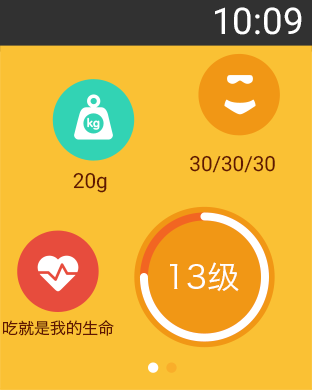
<style>
.page{position:relative;width:312px;height:390px;background:#fac134}
.page>*{position:absolute;margin:0}
.t1{font:36.7px "Roboto-Regular";color:#ffffff}
.t2{font:20.6px "Roboto-Regular";color:#601702}
.t3{font:32.1px "HiraginoSansGB-W3";color:#ffffff}
.t4{font:16px "HiraginoSansGB-W3";color:#601702}
</style>
<div class="page">
<p class="t1" style="left:215px;top:7px;width:87px;height:28px">10:09</p>
<p class="t2" style="left:190px;top:155px;width:85px;height:18px">30/30/30</p>
<p class="t2" style="left:73px;top:172px;width:34px;height:21px">20g</p>
<p class="t3" style="left:170px;top:262px;width:69px;height:30px">13级</p>
<p class="t4" style="left:2px;top:320px;width:112px;height:16px">吃就是我的生命</p>
</div>
